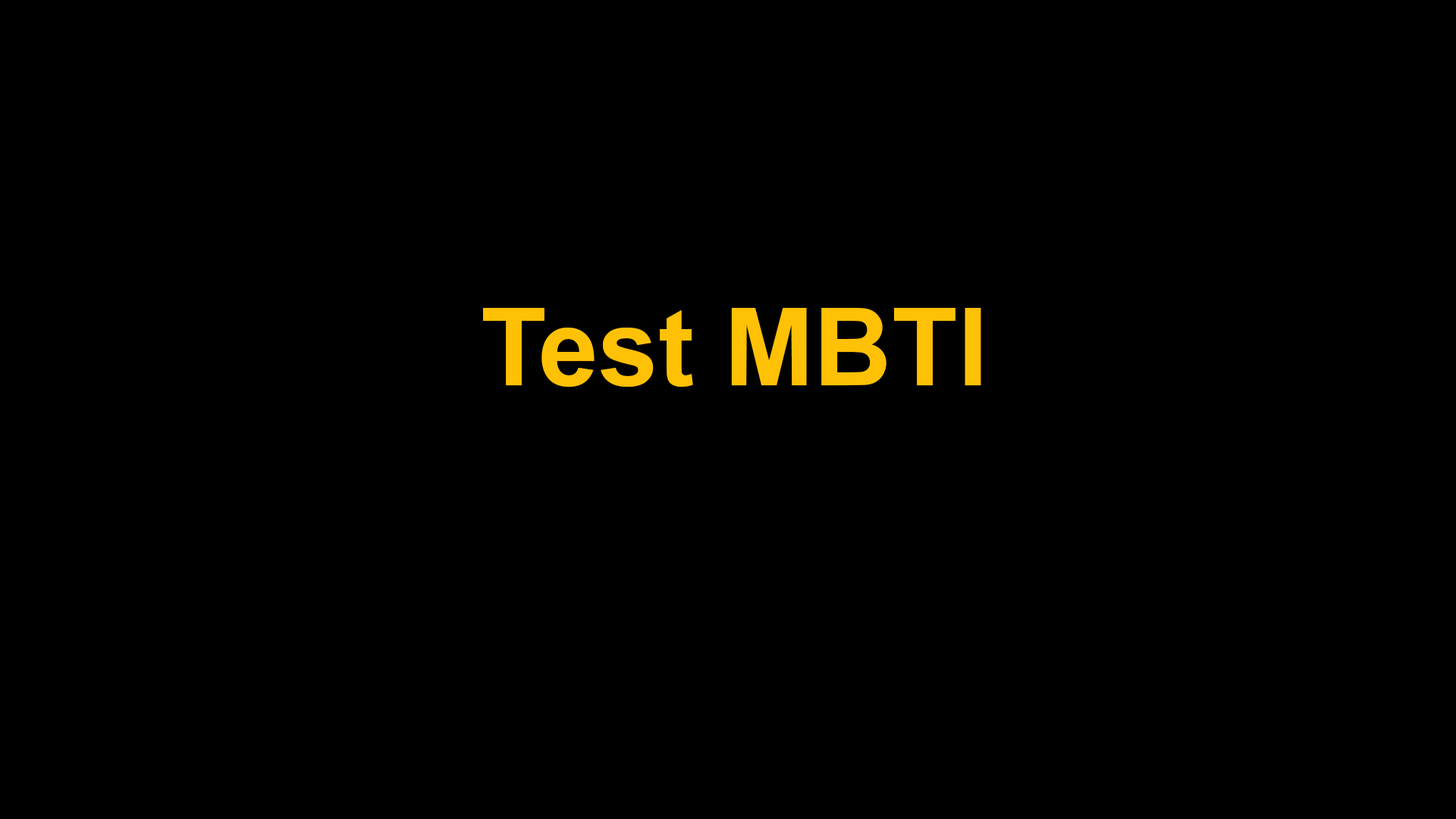
<style>
.page{position:relative;width:1456px;height:819px;background:#000000}
.page>*{position:absolute;margin:0}
.t1{font:107.7px "Arial-BoldMT";color:#ffc105}
</style>
<div class="page">
<p class="t1" style="left:483px;top:308px;width:498px;height:79px">Test MBTI</p>
</div>
